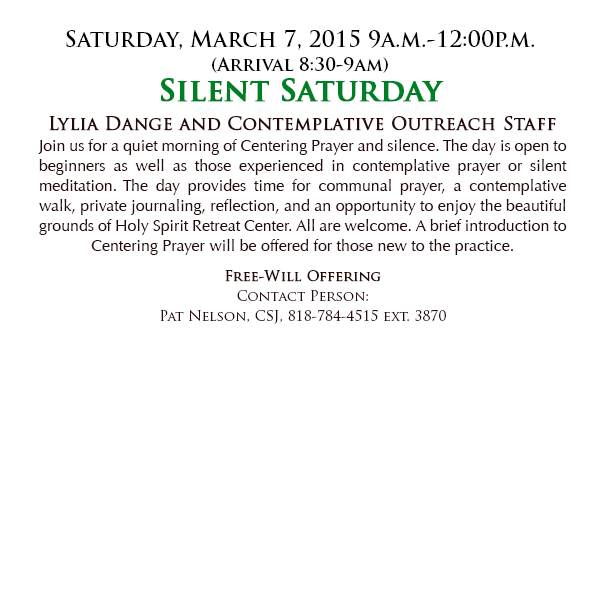
<style>
.page{position:relative;width:600px;height:600px;background:#ffffff}
.page>*{position:absolute;margin:0}
.t1{font:22px/24px "TrajanPro-Bold";color:#000000}
.t2{font:18px/24px "TrajanPro-Bold";color:#000000}
.t3{font:30px/30px "TrajanPro-Bold";color:#008024;font-weight:bold}
.t4{font:18px "TrajanPro-Regular";color:#270a0a;font-weight:bold}
.t5{font:16px/20px "Optima-Regular";color:#270a0a}
.t6{font:14px/20px "TrajanPro-Regular";color:#270a0a}
.t7{font:14px/20px "TrajanPro-Regular";color:#270a0a;font-weight:bold}
</style>
<div class="page">
<p class="t1" style="left:66px;top:30px;width:468px;height:72px;text-align:center">Saturday, March 7, 2015 9a.m.-12:00p.m. <br><span class="t2">(Arrival 8:30-9am)<br></span><span class="t3">Silent Saturday</span></p>
<p class="t4" style="left:49px;top:115px;width:507px;height:16px">Lylia Dange and Contemplative Outreach Staff</p>
<p class="t5" style="left:38px;top:139px;width:529px;height:116px;text-align:justify">Join us for a quiet morning of Centering Prayer and silence. The day is open to beginners as well as those experienced in contemplative prayer or silent meditation. The day provides time for communal prayer, a contemplative walk, private journaling, reflection, and an opportunity to enjoy the beautiful grounds of Holy Spirit Retreat Center. All are welcome. A brief introduction to Centering Prayer will be offered for those new to the practice.</p>
<p class="t6" style="left:160px;top:270px;width:286px;height:55px;text-align:center"><span class="t7">Free-Will Offering<br></span>Contact Person:  <br>Pat Nelson, CSJ, 818-784-4515 ext. 3870</p>
</div>
